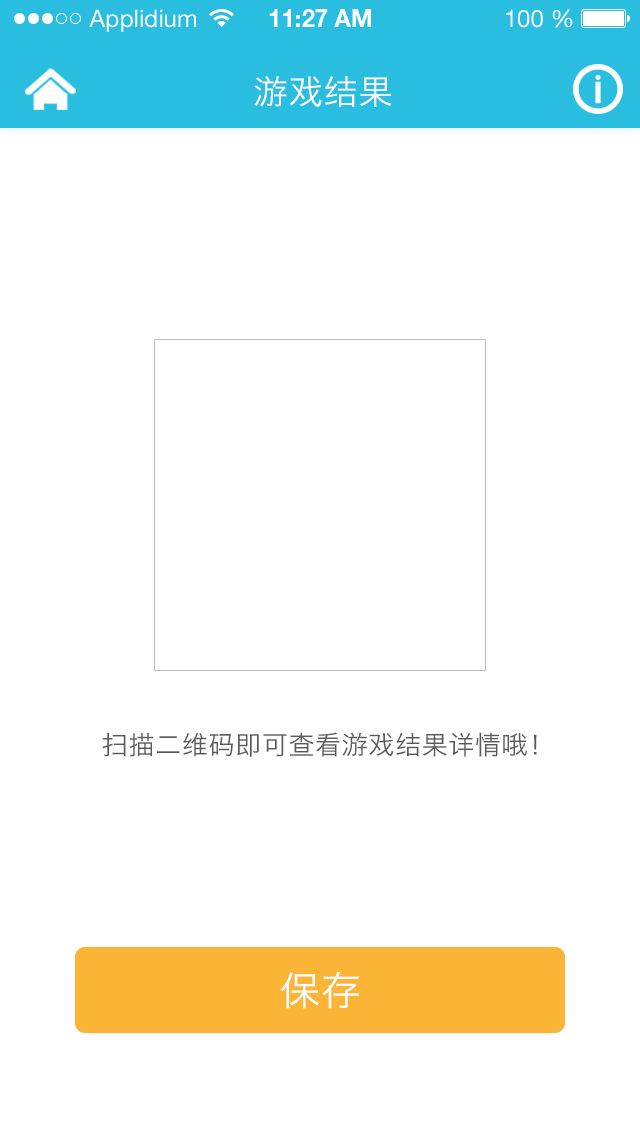
<style>
.page{position:relative;width:640px;height:1136px;background:#ffffff}
.page>*{position:absolute;margin:0}
.t1{font:34px "HiraginoSansGB-W3";letter-spacing:0.025em;color:#ffffff}
.t2{font:26px "HiraginoSansGB-W3";letter-spacing:0.025em;color:#595959}
.t3{font:40px "HiraginoSansGB-W3";letter-spacing:0.025em;color:#ffffff}
</style>
<div class="page">
<p class="t1" style="left:254px;top:76px;width:138px;height:31px">游戏结果</p>
<p class="t2" style="left:102px;top:732px;width:435px;height:25px">扫描二维码即可查看游戏结果详情哦！</p>
<p class="t3" style="left:280px;top:971px;width:79px;height:38px">保存</p>
</div>
